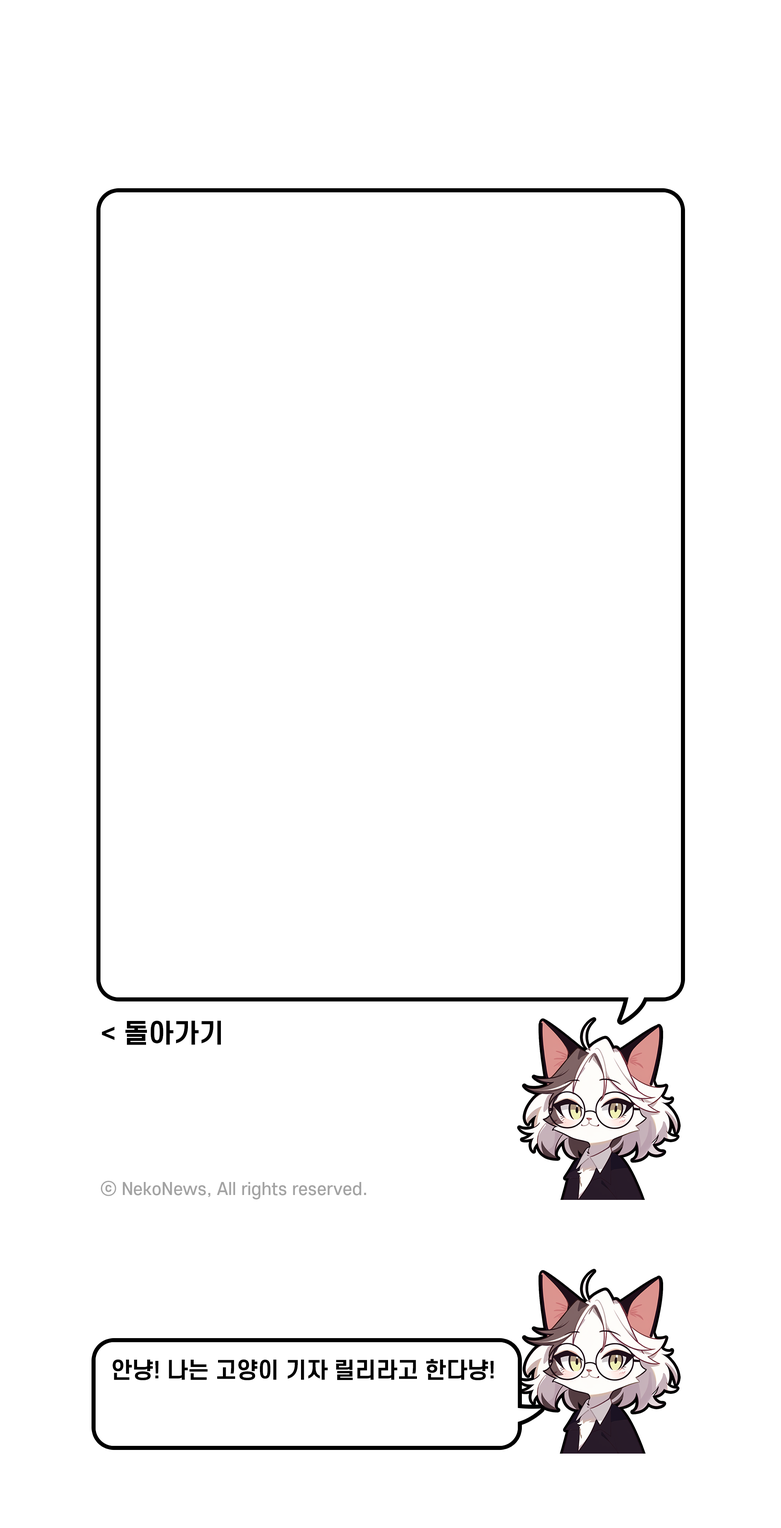
<style>
.page{position:relative;width:781px;height:1528px;background:#ffffff}
.page>*{position:absolute;margin:0}
.t1{font:26.1px "S-CoreDream-6Bold";color:#000000}
.t2{font:16.8px "S-CoreDream-5Medium";color:#a3a3a3}
.t3{font:22px "S-CoreDream-6Bold";color:#000000}
</style>
<div class="page">
<p class="t1" style="left:102px;top:1020px;width:119px;height:25px">&lt; 돌아가기</p>
<p class="t2" style="left:101px;top:1181px;width:265px;height:18px">ⓒ NekoNews, All rights reserved.</p>
<p class="t3" style="left:113px;top:1359px;width:381px;height:21px">안냥! 나는 고양이 기자 릴리라고 한다냥!</p>
</div>
